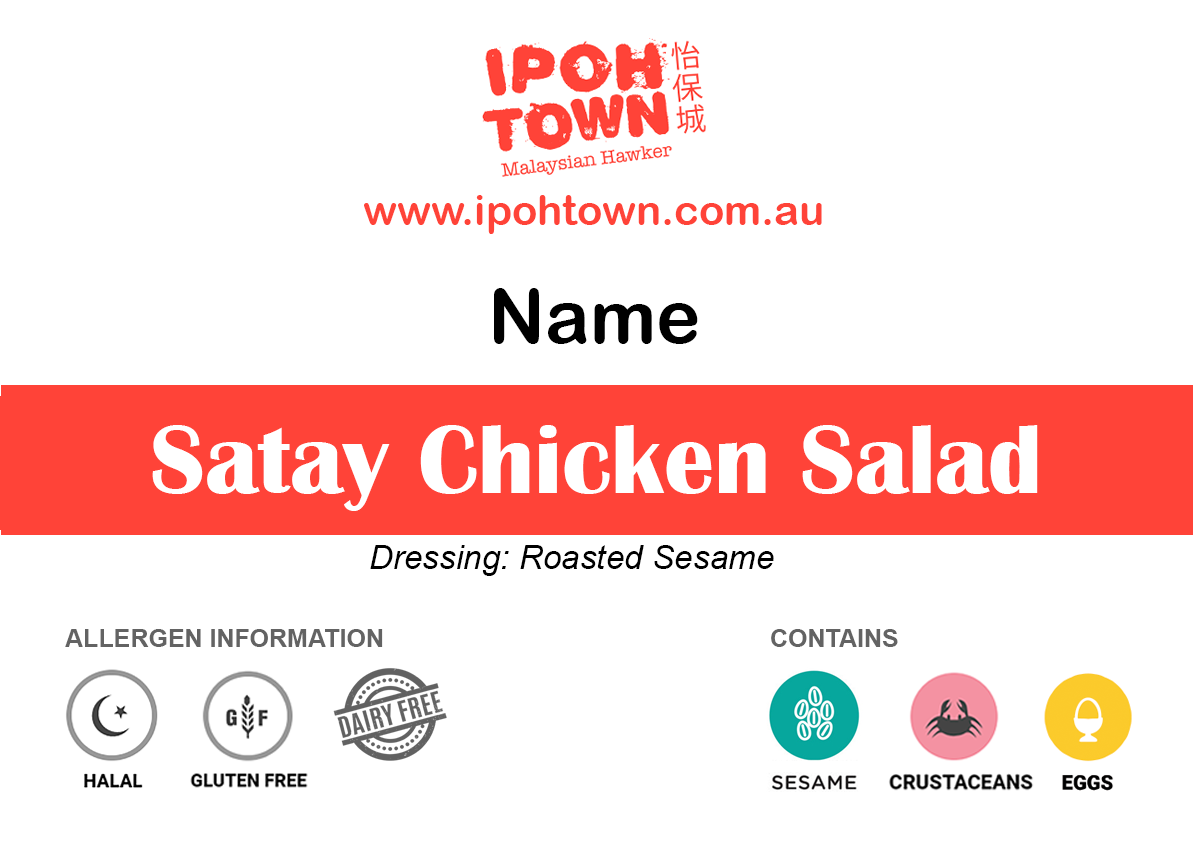
<style>
.page{position:relative;width:1193px;height:850px;background:#ffffff}
.page>*{position:absolute;margin:0}
.t1{font:41.7px "ArialRoundedMTBold";color:#ff4338}
.t2{font:75px "ArialRoundedMTBold";color:#000000}
.t3{font:100px "BritannicBold";color:#ffffff}
.t4{font:33.3px "Arial-ItalicMT";color:#000000}
.t5{font:25px "Arial-BoldMT";color:#636363}
</style>
<div class="page">
<p class="t1" style="left:364px;top:195px;width:458px;height:39px">www.ipohtown.com.au</p>
<p class="t2" style="left:494px;top:288px;width:204px;height:56px">Name</p>
<p class="t3" style="left:152px;top:425px;width:886px;height:86px">Satay Chicken Salad</p>
<p class="t4" style="left:370px;top:545px;width:404px;height:31px">Dressing: Roasted Sesame</p>
<p class="t5" style="left:65px;top:629px;width:318px;height:18px">ALLERGEN INFORMATION</p>
<p class="t5" style="left:771px;top:629px;width:127px;height:18px">CONTAINS</p>
</div>
